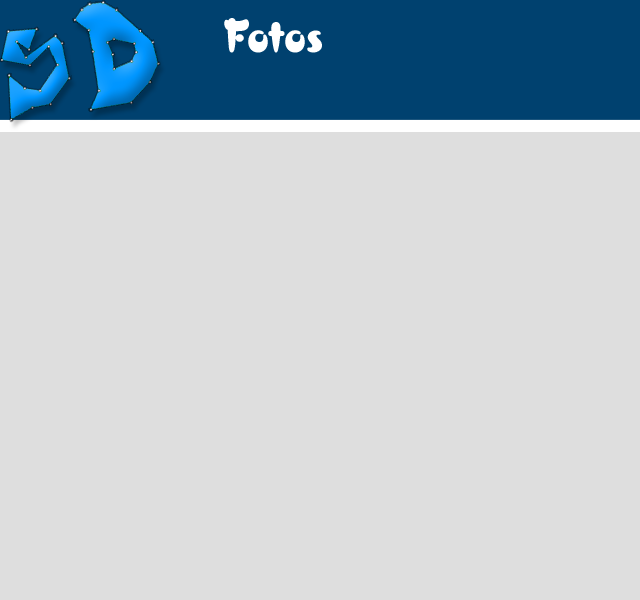
<style>
.page{position:relative;width:640px;height:600px;background:#dedede}
.page>*{position:absolute;margin:0}
.t1{font:48px "CroissantD";color:#ffffff}
</style>
<div class="page">
<p class="t1" style="left:224px;top:18px;width:98px;height:35px">Fotos</p>
</div>
